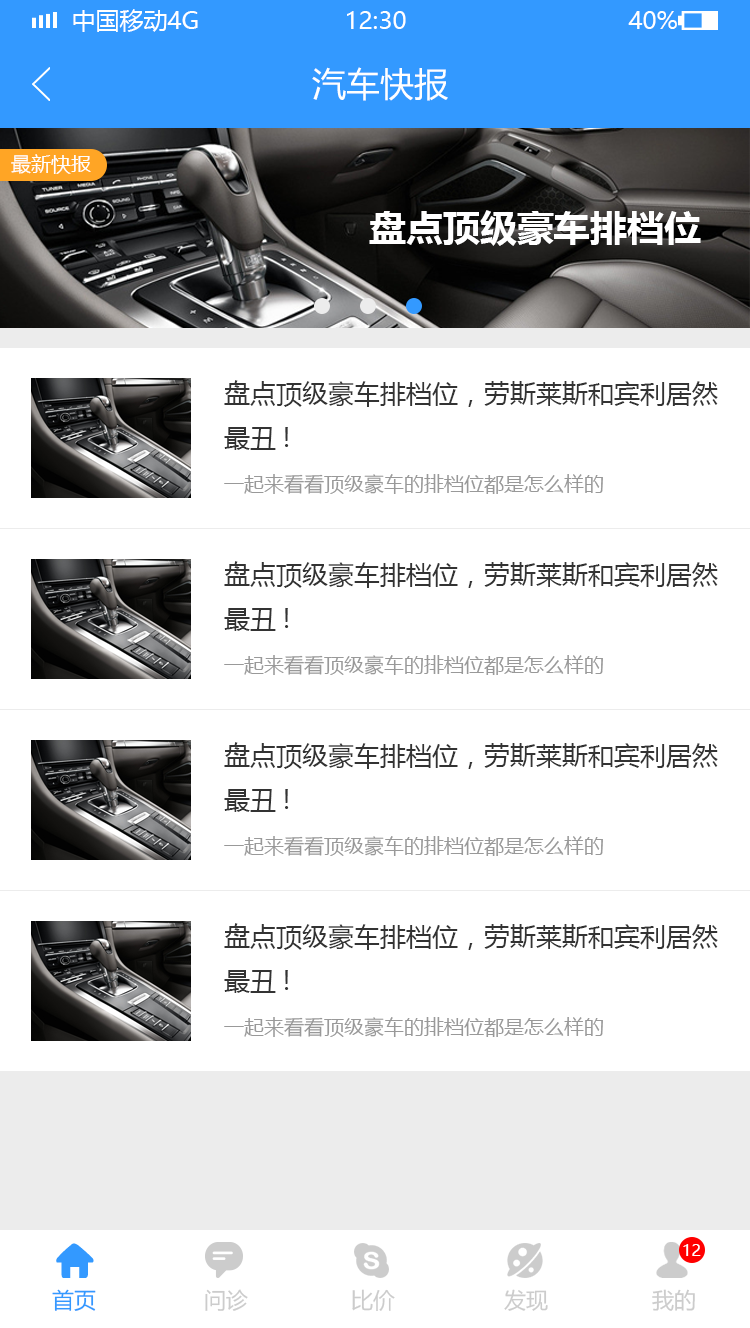
<style>
.page{position:relative;width:750px;height:1328px;background:#ffffff}
.page>*{position:absolute;margin:0}
.t1{font:24px "MicrosoftYaHei";color:#ffffff;text-transform:uppercase}
.t2{font:34px "MicrosoftYaHei";color:#ffffff}
.t3{font:20px "MicrosoftYaHei";color:#ffffff}
.t4{font:36.9px "MicrosoftYaHei-Bold";color:#ffffff}
.t5{font:26px/44px "MicrosoftYaHei";color:#333333}
.t6{font:20px "MicrosoftYaHei";color:#999999}
.t7{font:16px "MicrosoftYaHei";color:#ffffff}
.t8{font:22px "MicrosoftYaHei";color:#3399ff}
.t9{font:22px "MicrosoftYaHei";color:#cccccc}
</style>
<div class="page">
<p class="t1" style="left:73px;top:9px;width:125px;height:23px">中国移动4G</p>
<p class="t1" style="left:347px;top:11px;width:59px;height:18px">12:30</p>
<p class="t1" style="left:628px;top:11px;width:49px;height:18px">40%</p>
<p class="t2" style="left:312px;top:67px;width:136px;height:34px">汽车快报</p>
<p class="t3" style="left:11px;top:154px;width:80px;height:20px">最新快报</p>
<p class="t4" style="left:369px;top:210px;width:332px;height:36px">盘点顶级豪车排档位</p>
<p class="t5" style="left:224px;top:380px;width:494px;height:70px">盘点顶级豪车排档位，劳斯莱斯和宾利居然<br>最丑!</p>
<p class="t6" style="left:224px;top:474px;width:379px;height:20px">一起来看看顶级豪车的排档位都是怎么样的</p>
<p class="t5" style="left:224px;top:561px;width:494px;height:70px">盘点顶级豪车排档位，劳斯莱斯和宾利居然<br>最丑!</p>
<p class="t6" style="left:224px;top:655px;width:379px;height:20px">一起来看看顶级豪车的排档位都是怎么样的</p>
<p class="t5" style="left:224px;top:742px;width:494px;height:70px">盘点顶级豪车排档位，劳斯莱斯和宾利居然<br>最丑!</p>
<p class="t6" style="left:224px;top:836px;width:379px;height:20px">一起来看看顶级豪车的排档位都是怎么样的</p>
<p class="t5" style="left:224px;top:923px;width:494px;height:70px">盘点顶级豪车排档位，劳斯莱斯和宾利居然<br>最丑!</p>
<p class="t6" style="left:224px;top:1017px;width:379px;height:20px">一起来看看顶级豪车的排档位都是怎么样的</p>
<p class="t7" style="left:683px;top:1244px;width:18px;height:12px">12</p>
<p class="t8" style="left:52px;top:1289px;width:44px;height:22px">首页</p>
<p class="t9" style="left:205px;top:1289px;width:43px;height:22px">问诊</p>
<p class="t9" style="left:352px;top:1289px;width:43px;height:22px">比价</p>
<p class="t9" style="left:504px;top:1289px;width:44px;height:22px">发现</p>
<p class="t9" style="left:652px;top:1289px;width:43px;height:22px">我的</p>
</div>
